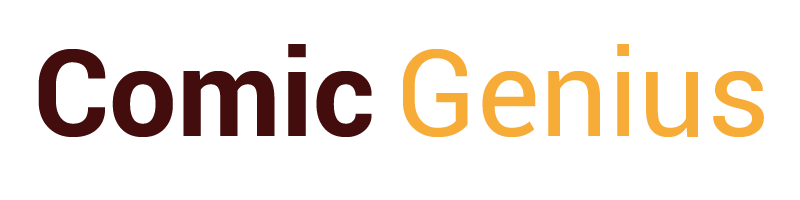
<style>
.page{position:relative;width:800px;height:200px;background:#ffffff}
.page>*{position:absolute;margin:0}
.t1{font:120px "Roboto-Bold";color:#430d0d}
.t2{font:120px "Roboto-Regular";color:#f7ad38}
</style>
<div class="page">
<p class="t1" style="left:38px;top:44px;width:334px;height:93px">Comic</p>
<p class="t2" style="left:403px;top:44px;width:361px;height:93px">Genius</p>
</div>
